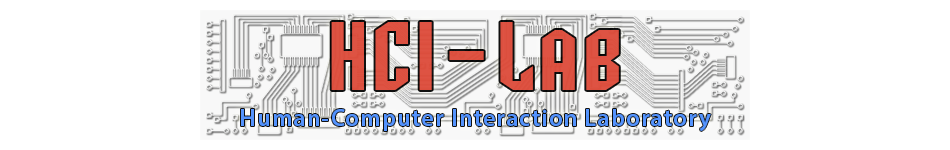
<style>
.page{position:relative;width:950px;height:150px;background:#ffffff}
.page>*{position:absolute;margin:0}
.t1{font:85px "SFArcheryBlackSC";letter-spacing:0.08em;color:#dd5141}
.t2{font:24px "MyriadPro-Semibold";letter-spacing:0.05em;color:#5393fd}
</style>
<div class="page">
<p class="t1" style="left:331px;top:22px;width:288px;height:68px">HCI-Lab</p>
<p class="t2" style="left:241px;top:109px;width:470px;height:22px">Human-Computer Interaction Laboratory</p>
</div>
